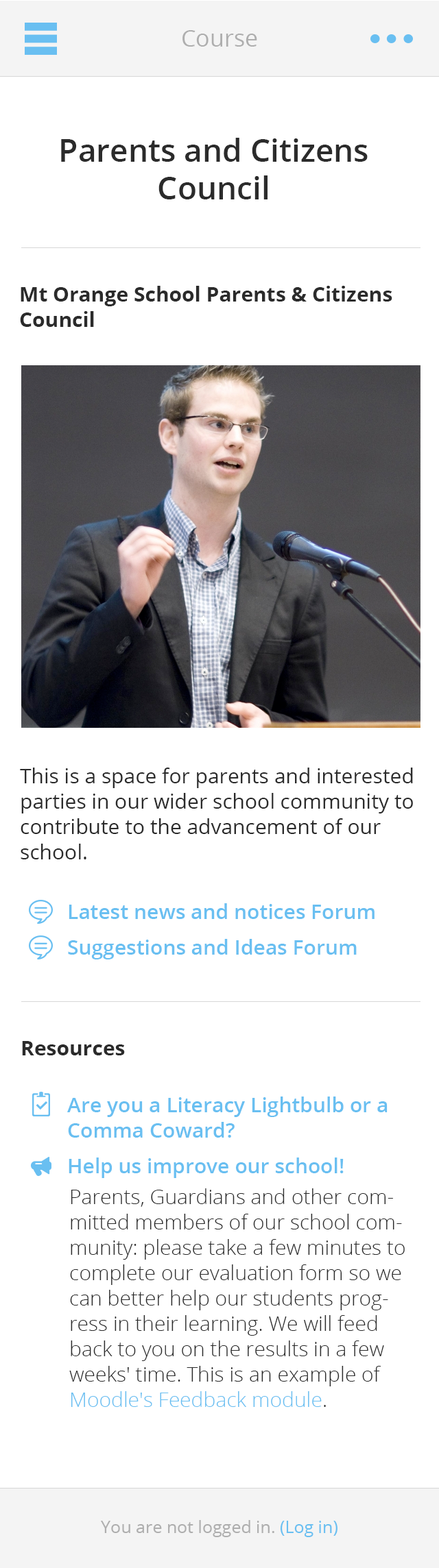
<style>
.page{position:relative;width:439px;height:1568px;background:#ffffff}
.page>*{position:absolute;margin:0}
.t1{font:23.3px "OpenSans";color:#aeaeae}
.t2{font:31.5px "OpenSans-Semibold";color:#2b2b2b}
.t3{font:20.6px/25.4px "OpenSans-Bold";color:#2b2b2b}
.t4{font:20.6px/25.4px "OpenSans";color:#2b2b2b}
.t5{font:20.6px "OpenSans-Semibold";color:#69bff1}
.t6{font:20.6px "OpenSans-Bold";color:#2b2b2b}
.t7{font:20.6px/25.4px "OpenSans-Semibold";color:#69bff1}
.t8{font:20.6px/25.4px "OpenSans-Light";color:#2b2b2b}
.t9{font:20.6px/25.4px "OpenSans-Light";color:#69bff1}
.t10{font:17.1px "OpenSans";color:#aeaeae}
.t11{font:17.1px "OpenSans";color:#69bff1}
</style>
<div class="page">
<p class="t1" style="left:182px;top:30px;width:75px;height:17px">Course</p>
<p class="t2" style="left:61px;top:138px;width:306px;height:61px;text-align:center">Parents and Citizens Council</p>
<p class="t3" style="left:20px;top:286px;width:372px;height:41px">Mt Orange School Parents &amp; Citizens Council</p>
<p class="t4" style="left:20px;top:768px;width:393px;height:91px">This is a space for parents and interested parties in our wider school community to contribute to the advancement of our school.</p>
<p class="t5" style="left:69px;top:903px;width:305px;height:16px">Latest news and notices Forum</p>
<p class="t5" style="left:68px;top:939px;width:288px;height:20px">Suggestions and Ideas Forum</p>
<p class="t6" style="left:22px;top:1041px;width:103px;height:14px">Resources</p>
<p class="t7" style="left:67px;top:1097px;width:320px;height:41px">Are you a Literacy Lightbulb or a <br>Comma Coward?</p>
<p class="t5" style="left:69px;top:1157px;width:274px;height:21px">Help us improve our school!</p>
<p class="t8" style="left:69px;top:1188px;width:335px;height:219px">Parents, Guardians and other committed members of our school community: please take a few minutes to complete our evaluation form so we can better help our students progress in their learning. We will feed back to you on the results in a few weeks' time. This is an example of <span class="t9">Moodle's Feedback module</span>.</p>
<p class="t10" style="left:101px;top:1520px;width:236px;height:17px">You are not logged in. <span class="t11">(Log in)</span></p>
</div>
